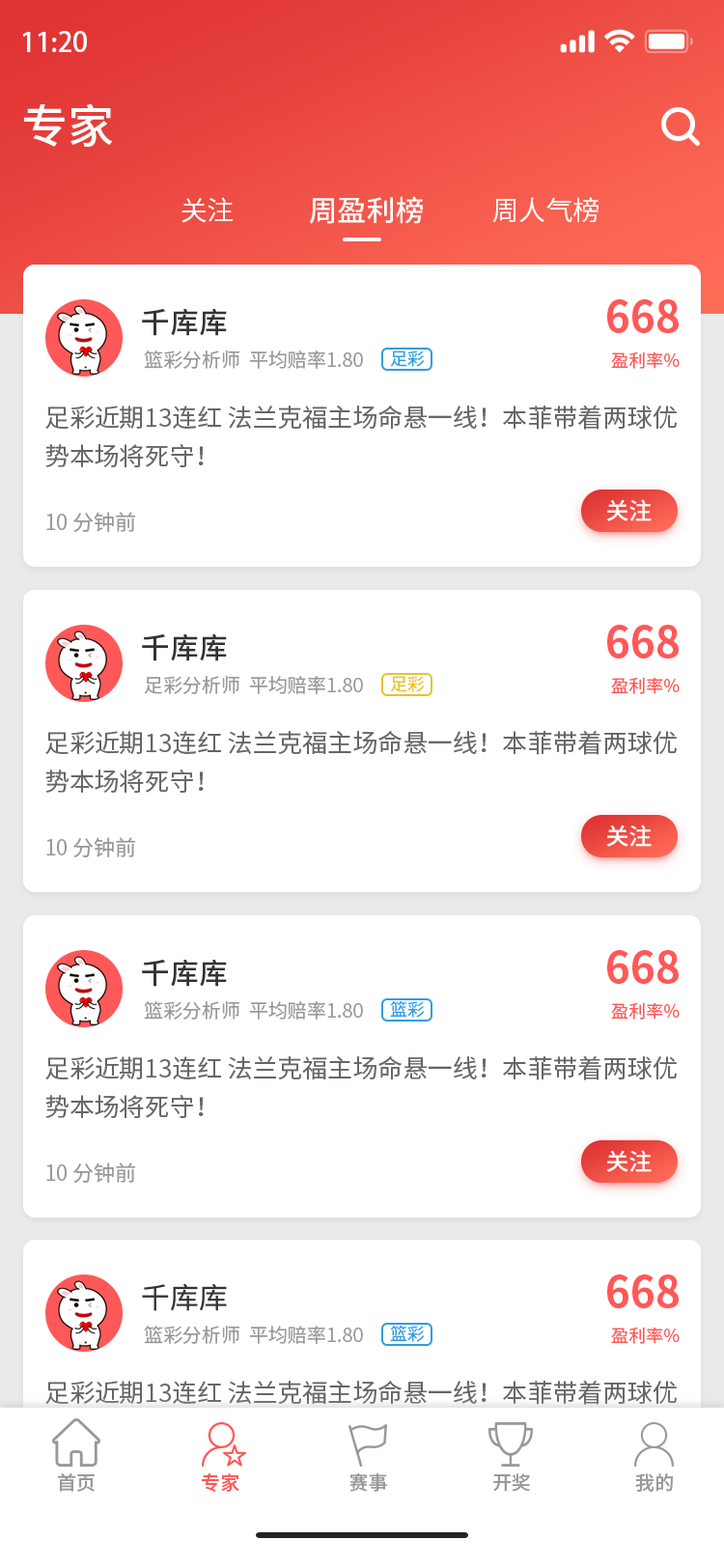
<style>
.page{position:relative;width:724px;height:1568px;background:#ffffff}
.page>*{position:absolute;margin:0}
.t1{font:27px "AdobeHeitiStd-Regular";color:#fefefe}
.t2{font:46.3px "SourceHanSansCN-Medium";color:#ffffff}
.t3{font:27px "SourceHanSansCN-Regular";color:#ffffff}
.t4{font:29px "SourceHanSansCN-Medium";color:#ffffff}
.t5{font:42.5px "SourceHanSansCN-Bold";color:#ff5858}
.t6{font:29px "SourceHanSansCN-Medium";color:#333333}
.t7{font:19.3px "SourceHanSansCN-Regular";color:#999999}
.t8{font:17.4px "SourceHanSansCN-Regular";color:#319de2}
.t9{font:17.4px "SourceHanSansCN-Regular";color:#ff5858}
.t10{font:25.1px/38.6px "SourceHanSansCN-Regular";color:#666666}
.t11{font:23.2px "SourceHanSansCN-Medium";color:#ffffff}
.t12{font:21.2px "SourceHanSansCN-Regular";color:#999999}
.t13{font:17.4px "SourceHanSansCN-Regular";color:#e2c331}
.t14{font:29px "SourceHanSansCN-Regular";color:#333333}
.t15{font:19.3px "SourceHanSansCN-Medium";color:#999999}
.t16{font:19.3px "SourceHanSansCN-Medium";color:#ff5858}
</style>
<div class="page">
<p class="t1" style="left:22px;top:31px;width:65px;height:21px">11:20</p>
<p class="t2" style="left:24px;top:103px;width:89px;height:44px">专家</p>
<p class="t3" style="left:182px;top:197px;width:51px;height:26px">关注</p>
<p class="t4" style="left:309px;top:196px;width:114px;height:28px">周盈利榜</p>
<p class="t3" style="left:492px;top:197px;width:107px;height:26px">周人气榜</p>
<p class="t5" style="left:607px;top:299px;width:72px;height:34px">668</p>
<p class="t6" style="left:142px;top:308px;width:85px;height:28px">千库库</p>
<p class="t7" style="left:144px;top:350px;width:219px;height:19px">篮彩分析师  平均赔率1.80</p>
<p class="t8" style="left:390px;top:350px;width:35px;height:17px">足彩</p>
<p class="t9" style="left:611px;top:351px;width:69px;height:18px">盈利率%</p>
<p class="t10" style="left:45px;top:406px;width:632px;height:61px">足彩近期13连红 法兰克福主场命悬一线！本菲带着两球优势本场将死守！</p>
<p class="t11" style="left:606px;top:499px;width:46px;height:22px">关注</p>
<p class="t12" style="left:46px;top:512px;width:89px;height:20px">10 分钟前</p>
<p class="t5" style="left:607px;top:625px;width:72px;height:33px">668</p>
<p class="t6" style="left:142px;top:633px;width:85px;height:28px">千库库</p>
<p class="t7" style="left:144px;top:676px;width:219px;height:18px">足彩分析师  平均赔率1.80</p>
<p class="t13" style="left:390px;top:676px;width:35px;height:16px">足彩</p>
<p class="t9" style="left:611px;top:677px;width:69px;height:17px">盈利率%</p>
<p class="t10" style="left:45px;top:731px;width:632px;height:62px">足彩近期13连红 法兰克福主场命悬一线！本菲带着两球优势本场将死守！</p>
<p class="t11" style="left:606px;top:825px;width:46px;height:22px">关注</p>
<p class="t12" style="left:46px;top:837px;width:89px;height:20px">10 分钟前</p>
<p class="t5" style="left:607px;top:950px;width:72px;height:34px">668</p>
<p class="t6" style="left:142px;top:959px;width:85px;height:28px">千库库</p>
<p class="t7" style="left:144px;top:1001px;width:219px;height:19px">篮彩分析师  平均赔率1.80</p>
<p class="t8" style="left:390px;top:1000px;width:35px;height:18px">篮彩</p>
<p class="t9" style="left:611px;top:1002px;width:69px;height:18px">盈利率%</p>
<p class="t10" style="left:45px;top:1056px;width:632px;height:62px">足彩近期13连红 法兰克福主场命悬一线！本菲带着两球优势本场将死守！</p>
<p class="t11" style="left:606px;top:1150px;width:46px;height:22px">关注</p>
<p class="t12" style="left:46px;top:1162px;width:89px;height:21px">10 分钟前</p>
<p class="t5" style="left:607px;top:1274px;width:72px;height:34px">668</p>
<p class="t14" style="left:142px;top:1283px;width:85px;height:28px">千库库</p>
<p class="t7" style="left:144px;top:1326px;width:219px;height:18px">篮彩分析师  平均赔率1.80</p>
<p class="t8" style="left:390px;top:1325px;width:35px;height:17px">篮彩</p>
<p class="t9" style="left:611px;top:1327px;width:69px;height:17px">盈利率%</p>
<p class="t10" style="left:45px;top:1381px;width:632px;height:61px">足彩近期13连红 法兰克福主场命悬一线！本菲带着两球优势本场将死守！</p>
<p class="t15" style="left:57px;top:1473px;width:38px;height:19px">首页</p>
<p class="t16" style="left:202px;top:1473px;width:37px;height:19px">专家</p>
<p class="t15" style="left:350px;top:1473px;width:37px;height:19px">赛事</p>
<p class="t15" style="left:493px;top:1473px;width:37px;height:19px">开奖</p>
<p class="t15" style="left:635px;top:1473px;width:38px;height:19px">我的</p>
</div>
